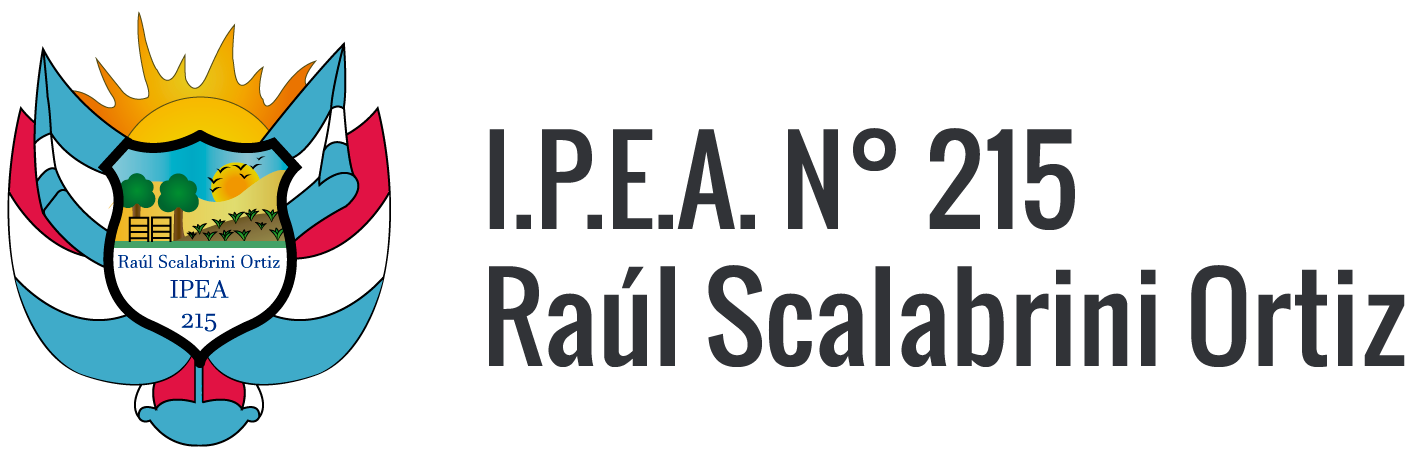
<style>
.page{position:relative;width:1417px;height:454px;background:#ffffff}
.page>*{position:absolute;margin:0}
.t1{font:114px "Oswald-Regular";color:#313337}
</style>
<div class="page">
<p class="t1" style="left:489px;top:128px;width:916px;height:239px">I.P.E.A. N° 215                 Raúl Scalabrini Ortiz</p>
</div>
